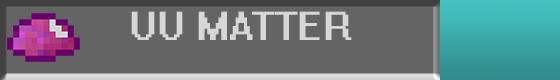
<style>
.page{position:relative;width:560px;height:80px;background:#646464}
.page>*{position:absolute;margin:0}
.t1{font:36px "System";color:#d7d7d7}
</style>
<div class="page">
<p class="t1" style="left:131px;top:11px;width:221px;height:29px">UU MATTER</p>
</div>
